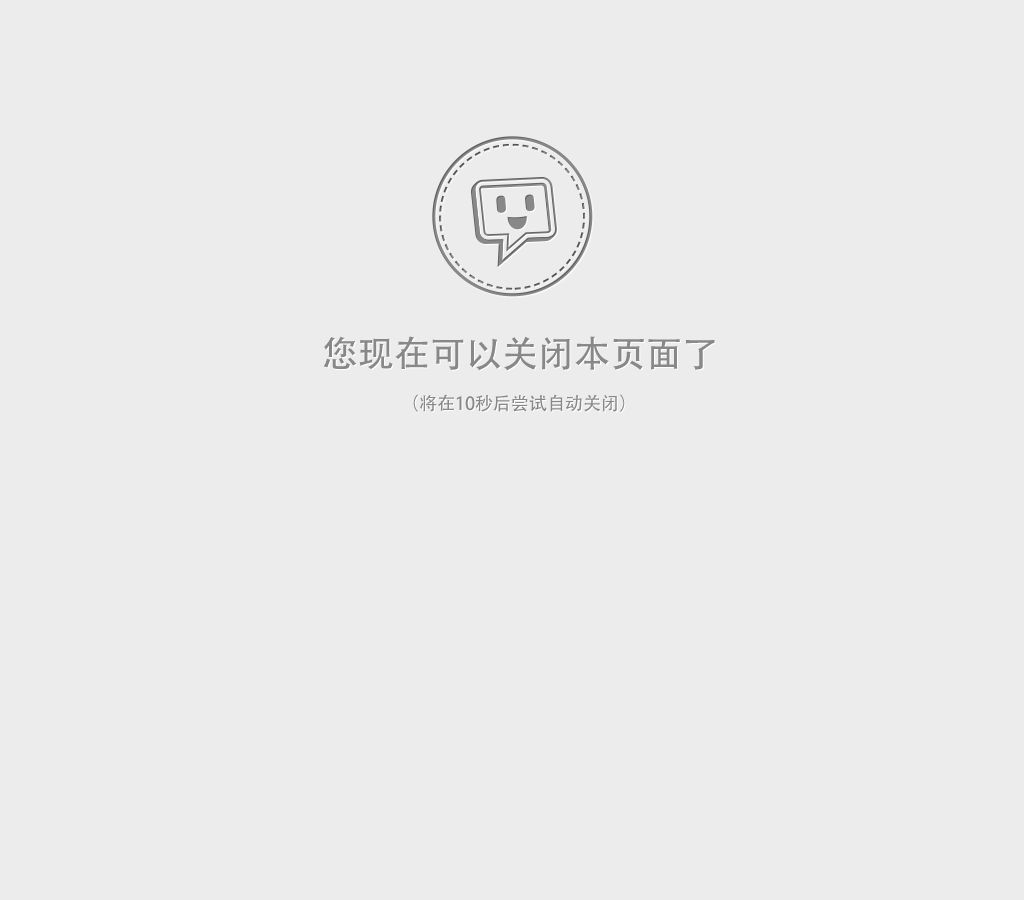
<style>
.page{position:relative;width:1024px;height:900px;background:#ececec}
.page>*{position:absolute;margin:0}
.t1{font:36px "AdobeHeitiStd-Regular";color:#888888}
.t2{font:18px "AdobeHeitiStd-Regular";color:#888888}
</style>
<div class="page">
<p class="t1" style="left:323px;top:336px;width:392px;height:35px">您现在可以关闭本页面了</p>
<p class="t2" style="left:413px;top:394px;width:212px;height:18px">（将在10秒后尝试自动关闭）</p>
</div>
